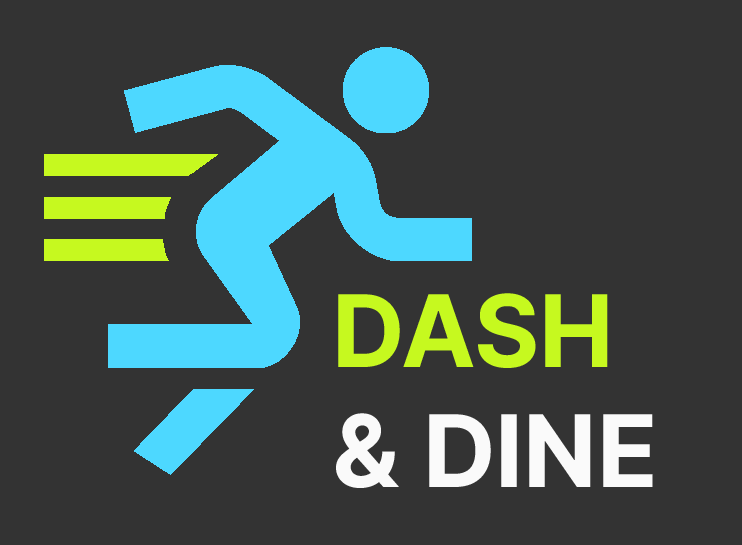
<style>
.page{position:relative;width:742px;height:545px;background:#333333}
.page>*{position:absolute;margin:0}
.t1{font:100px "Inter-Bold";color:#fafafa}
.t2{font:100px "Inter-Bold";color:#c6f91f}
</style>
<div class="page">
<p class="t1" style="left:336px;top:293px;width:317px;height:195px"><span class="t2">DASH <br></span>&amp; DINE</p>
</div>
